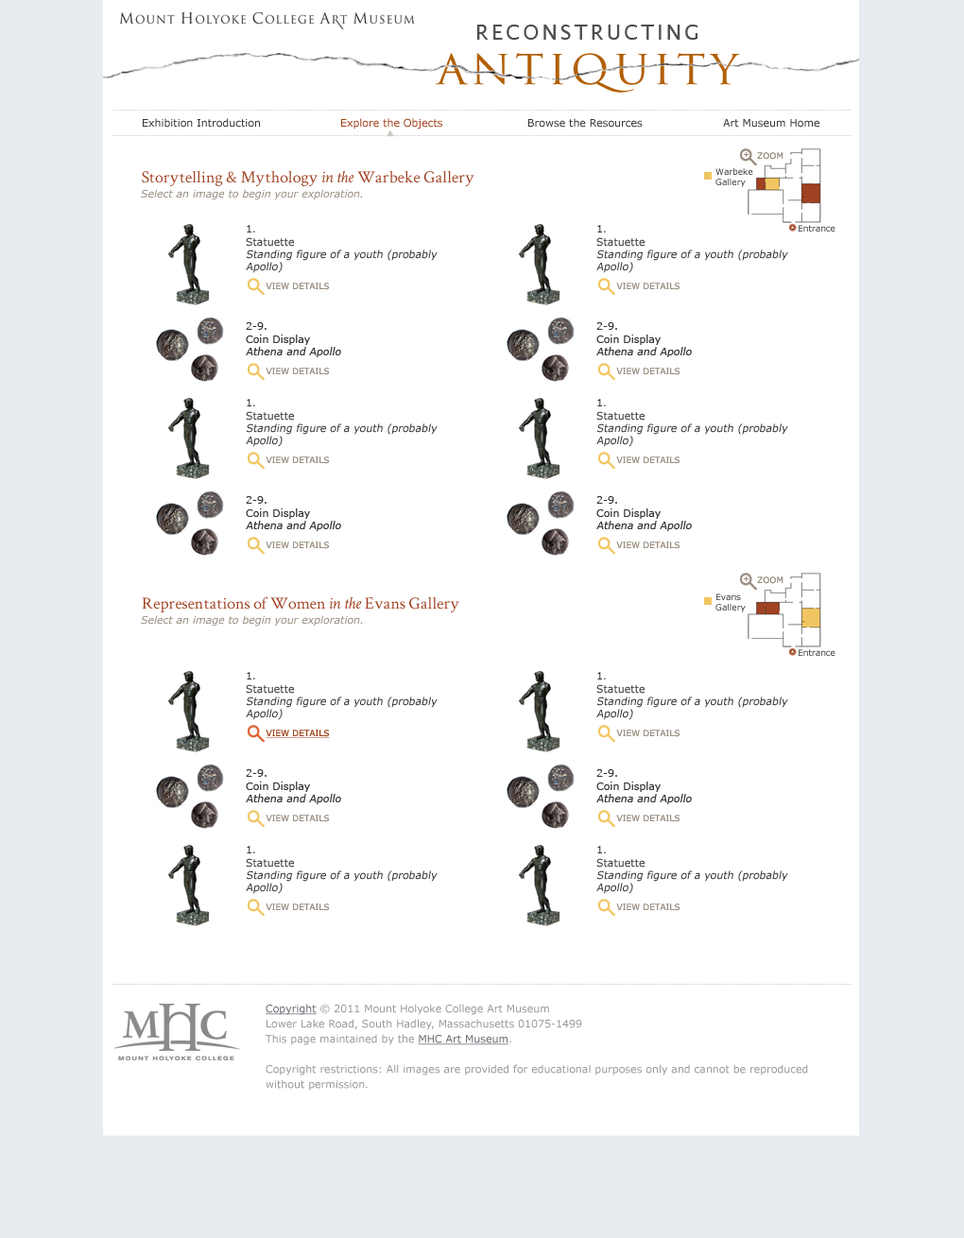
<style>
.page{position:relative;width:964px;height:1238px;background:#ffffff}
.page>*{position:absolute;margin:0}
.t1{font:20.8px "LucidaSans";letter-spacing:0.14em;color:#4e4e4e;text-transform:uppercase}
.t2{font:47.2px "TrajanPro-Regular";letter-spacing:0.1em;color:#b25f06}
.t3{font:10.4px "Verdana";color:#333333}
.t4{font:10.4px "Verdana";color:#9f401a}
.t5{font:17px "CrimsonText-Roman";color:#9f4222}
.t6{font:17px "CrimsonText-Italic";color:#9f4222}
.t7{font:10.4px "Verdana-Italic";color:#988c7e}
.t8{font:10.4px "Verdana";color:#333333;font-style:italic}
.t9{font:8.5px "Verdana";color:#988c7e}
.t10{font:8.5px "Verdana";color:#9f401a;text-decoration:underline}
.t11{font:10.4px/15.1px "Verdana";color:#999999}
.t12{font:10.4px/15.1px "Verdana";color:#656a71;text-decoration:underline}
.t13{font:10.4px/15.1px "Verdana";color:#656971;text-decoration:underline}
</style>
<div class="page">
<p class="t1" style="left:476px;top:25px;width:222px;height:15px">reconstructing</p>
<p class="t2" style="left:435px;top:53px;width:305px;height:40px">antiquity</p>
<p class="t3" style="left:143px;top:118px;width:117px;height:10px">Exhibition Introduction</p>
<p class="t4" style="left:341px;top:118px;width:101px;height:11px">Explore the Objects</p>
<p class="t3" style="left:528px;top:118px;width:114px;height:10px">Browse the Resources</p>
<p class="t3" style="left:723px;top:119px;width:96px;height:9px">Art Museum Home</p>
<p class="t5" style="left:142px;top:170px;width:332px;height:16px">Storytelling &amp; Mythology <span class="t6">in the</span> Warbeke Gallery</p>
<p class="t7" style="left:141px;top:189px;width:222px;height:11px">Select an image to begin your exploration.</p>
<p class="t8" style="left:246px;top:225px;width:191px;height:48px;text-align:justify"><span class="t3">1. <br>Statuette<br></span>Standing figure of a youth (probably <br>Apollo)</p>
<p class="t8" style="left:596px;top:225px;width:192px;height:48px;text-align:justify"><span class="t3">1. <br>Statuette<br></span>Standing figure of a youth (probably <br>Apollo)</p>
<p class="t9" style="left:265px;top:282px;width:64px;height:8px">VIEW DETAILS</p>
<p class="t9" style="left:616px;top:282px;width:63px;height:8px">VIEW DETAILS</p>
<p class="t3" style="left:246px;top:322px;width:95px;height:35px;text-align:justify">2-9. <br>Coin Display<br><span class="t8">Athena and Apollo</span></p>
<p class="t3" style="left:596px;top:322px;width:96px;height:35px;text-align:justify">2-9. <br>Coin Display<br><span class="t8">Athena and Apollo</span></p>
<p class="t9" style="left:265px;top:367px;width:64px;height:8px">VIEW DETAILS</p>
<p class="t9" style="left:616px;top:367px;width:63px;height:8px">VIEW DETAILS</p>
<p class="t8" style="left:246px;top:399px;width:191px;height:48px;text-align:justify"><span class="t3">1. <br>Statuette<br></span>Standing figure of a youth (probably <br>Apollo)</p>
<p class="t8" style="left:596px;top:399px;width:192px;height:48px;text-align:justify"><span class="t3">1. <br>Statuette<br></span>Standing figure of a youth (probably <br>Apollo)</p>
<p class="t9" style="left:265px;top:456px;width:64px;height:8px">VIEW DETAILS</p>
<p class="t9" style="left:616px;top:456px;width:63px;height:8px">VIEW DETAILS</p>
<p class="t3" style="left:246px;top:496px;width:95px;height:35px;text-align:justify">2-9. <br>Coin Display<br><span class="t8">Athena and Apollo</span></p>
<p class="t3" style="left:596px;top:496px;width:96px;height:35px;text-align:justify">2-9. <br>Coin Display<br><span class="t8">Athena and Apollo</span></p>
<p class="t9" style="left:265px;top:541px;width:64px;height:8px">VIEW DETAILS</p>
<p class="t9" style="left:616px;top:541px;width:63px;height:8px">VIEW DETAILS</p>
<p class="t5" style="left:142px;top:596px;width:317px;height:16px">Representations of Women <span class="t6">in the</span> Evans Gallery</p>
<p class="t7" style="left:141px;top:615px;width:222px;height:11px">Select an image to begin your exploration.</p>
<p class="t8" style="left:246px;top:672px;width:191px;height:48px;text-align:justify"><span class="t3">1. <br>Statuette<br></span>Standing figure of a youth (probably <br>Apollo)</p>
<p class="t8" style="left:596px;top:672px;width:192px;height:48px;text-align:justify"><span class="t3">1. <br>Statuette<br></span>Standing figure of a youth (probably <br>Apollo)</p>
<p class="t10" style="left:265px;top:729px;width:65px;height:9px">VIEW DETAILS</p>
<p class="t9" style="left:616px;top:729px;width:63px;height:8px">VIEW DETAILS</p>
<p class="t3" style="left:246px;top:769px;width:95px;height:35px;text-align:justify">2-9. <br>Coin Display<br><span class="t8">Athena and Apollo</span></p>
<p class="t3" style="left:596px;top:769px;width:96px;height:35px;text-align:justify">2-9. <br>Coin Display<br><span class="t8">Athena and Apollo</span></p>
<p class="t9" style="left:265px;top:814px;width:64px;height:8px">VIEW DETAILS</p>
<p class="t9" style="left:616px;top:814px;width:63px;height:8px">VIEW DETAILS</p>
<p class="t8" style="left:246px;top:845px;width:191px;height:49px;text-align:justify"><span class="t3">1. <br>Statuette<br></span>Standing figure of a youth (probably <br>Apollo)</p>
<p class="t8" style="left:596px;top:845px;width:192px;height:49px;text-align:justify"><span class="t3">1. <br>Statuette<br></span>Standing figure of a youth (probably <br>Apollo)</p>
<p class="t9" style="left:265px;top:903px;width:64px;height:8px">VIEW DETAILS</p>
<p class="t9" style="left:616px;top:903px;width:63px;height:8px">VIEW DETAILS</p>
<p class="t11" style="left:265px;top:1003px;width:543px;height:87px"><span class="t12">Copyright </span>© 2011 Mount Holyoke College Art Museum<br>Lower Lake Road, South Hadley, Massachusetts 01075-1499<br>This page maintained by the <span class="t13">MHC Art Museum</span>.<br><br>Copyright restrictions: All images are provided for educational purposes only and cannot be reproduced without permission.</p>
</div>
